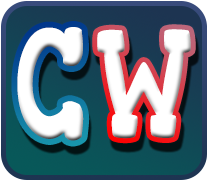
<style>
.page{position:relative;width:208px;height:182px}
.page>*{position:absolute;margin:0}
.t1{font:155.8px "Gorditas-Regular";letter-spacing:0.01em;color:#ffffff;font-variant:small-caps;scale:0.71 1}
.t2{font:155.8px "Gorditas-Regular";letter-spacing:-0.03em;color:#ffffff;font-variant:small-caps;scale:0.67 1}
.t3{font:155.8px "Gorditas-Regular";letter-spacing:-0.13em;color:#ffffff;font-variant:small-caps;scale:0.67 1}
</style>
<div class="page">
<p class="t1" style="left:17px;top:27px;width:67px;height:114px">C</p>
<p class="t2" style="left:97px;top:29px;width:94px;height:110px"><span class="t3"> </span>W</p>
</div>
